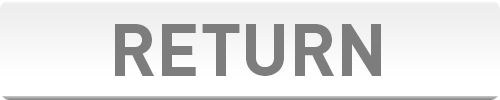
<style>
.page{position:relative;width:500px;height:100px;background:#ffffff}
.page>*{position:absolute;margin:0}
.t1{font:72px "DINPro-Bold";color:#7d7d7d}
</style>
<div class="page">
<p class="t1" style="left:115px;top:24px;width:266px;height:52px">RETURN</p>
</div>
